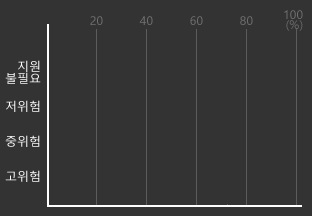
<style>
.page{position:relative;width:312px;height:216px;background:#333333}
.page>*{position:absolute;margin:0}
.t1{font:12px "MalgunGothic";letter-spacing:-0.001em;color:#717171}
.t2{font:12px/10px "MalgunGothic";letter-spacing:-0.001em;color:#717171}
.t3{font:12px/12px "MalgunGothic";letter-spacing:-0.001em;color:#ffffff}
.t4{font:12px/35px "MalgunGothic";letter-spacing:-0.001em;color:#ffffff}
</style>
<div class="page">
<p class="t1" style="left:90px;top:16px;width:13px;height:9px">20</p>
<p class="t1" style="left:139px;top:16px;width:14px;height:9px">40</p>
<p class="t1" style="left:190px;top:16px;width:13px;height:9px">60</p>
<p class="t1" style="left:240px;top:16px;width:13px;height:9px">80</p>
<p class="t2" style="left:284px;top:10px;width:19px;height:21px;text-align:right">100<br>(%)</p>
<p class="t3" style="left:5px;top:60px;width:36px;height:24px;text-align:right">지원<br>불필요</p>
<p class="t4" style="left:5px;top:100px;width:35px;height:82px;text-align:right">저위험<br>중위험<br>고위험</p>
</div>
